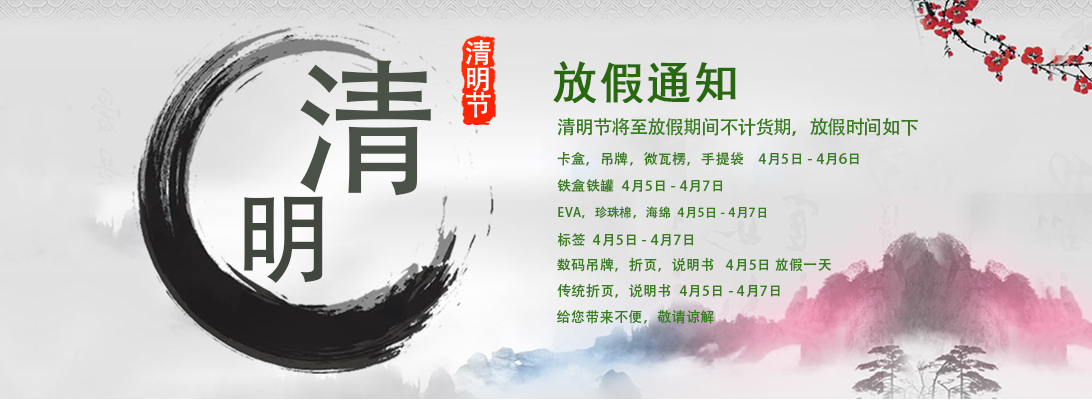
<style>
.page{position:relative;width:1092px;height:400px}
.page>*{position:absolute;margin:0}
.t1{font:27.4px/25.9px "AdobeHeitiStd-Regular";letter-spacing:0.03em;color:#ffffff}
.t2{font:148.2px "AdobeHeitiStd-Regular";letter-spacing:0.03em;color:#4a5247}
.t3{font:44.6px "SimHei";letter-spacing:0.03em;color:#28680f;font-weight:bold}
.t4{font:19px "AdobeHeitiStd-Regular";letter-spacing:-0.05em;color:#387d1e}
.t5{font:14px "AdobeHeitiStd-Regular";letter-spacing:0.03em;color:#387d1e}
.t6{font:100.7px "AdobeHeitiStd-Regular";letter-spacing:0.03em;color:#41463f}
.t7{font:12.4px "AdobeHeitiStd-Regular";letter-spacing:0.03em;color:#387d1e}
</style>
<div class="page">
<p class="t1" style="left:466px;top:40px;width:25px;height:78px">清<br>明<br>节</p>
<p class="t2" style="left:300px;top:60px;width:131px;height:136px">清</p>
<p class="t3" style="left:553px;top:61px;width:183px;height:42px">放假通知</p>
<p class="t4" style="left:557px;top:117px;width:361px;height:19px">清明节将至放假期间不计货期，放假时间如下</p>
<p class="t5" style="left:557px;top:152px;width:302px;height:14px">卡盒，吊牌，微瓦楞，手提袋    4月5日 - 4月6日</p>
<p class="t5" style="left:557px;top:179px;width:166px;height:14px">铁盒铁罐  4月5日 - 4月7日</p>
<p class="t6" style="left:244px;top:196px;width:79px;height:87px">明</p>
<p class="t7" style="left:558px;top:206px;width:209px;height:13px">EVA，珍珠棉，海绵  4月5日 - 4月7日</p>
<p class="t5" style="left:557px;top:232px;width:137px;height:15px">标签  4月5日 - 4月7日</p>
<p class="t5" style="left:557px;top:257px;width:274px;height:15px">数码吊牌，折页，说明书   4月5日 放假一天</p>
<p class="t5" style="left:557px;top:283px;width:223px;height:15px">传统折页，说明书  4月5日 - 4月7日</p>
<p class="t5" style="left:557px;top:310px;width:157px;height:14px">给您带来不便，敬请谅解</p>
</div>
